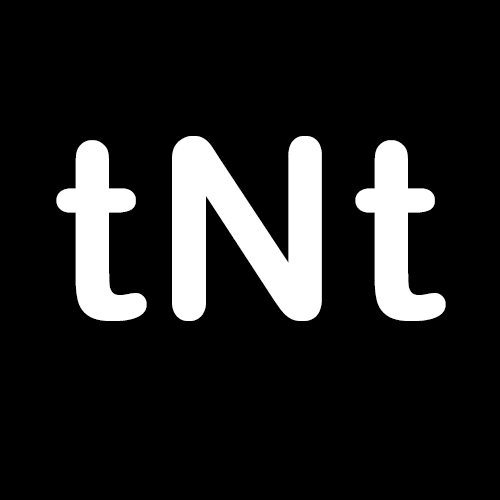
<style>
.page{position:relative;width:500px;height:500px;background:#000000}
.page>*{position:absolute;margin:0}
.t1{font:250px "ArialRoundedMTBold";letter-spacing:0.04em;color:#ffffff}
</style>
<div class="page">
<p class="t1" style="left:56px;top:136px;width:390px;height:185px">tNt</p>
</div>
